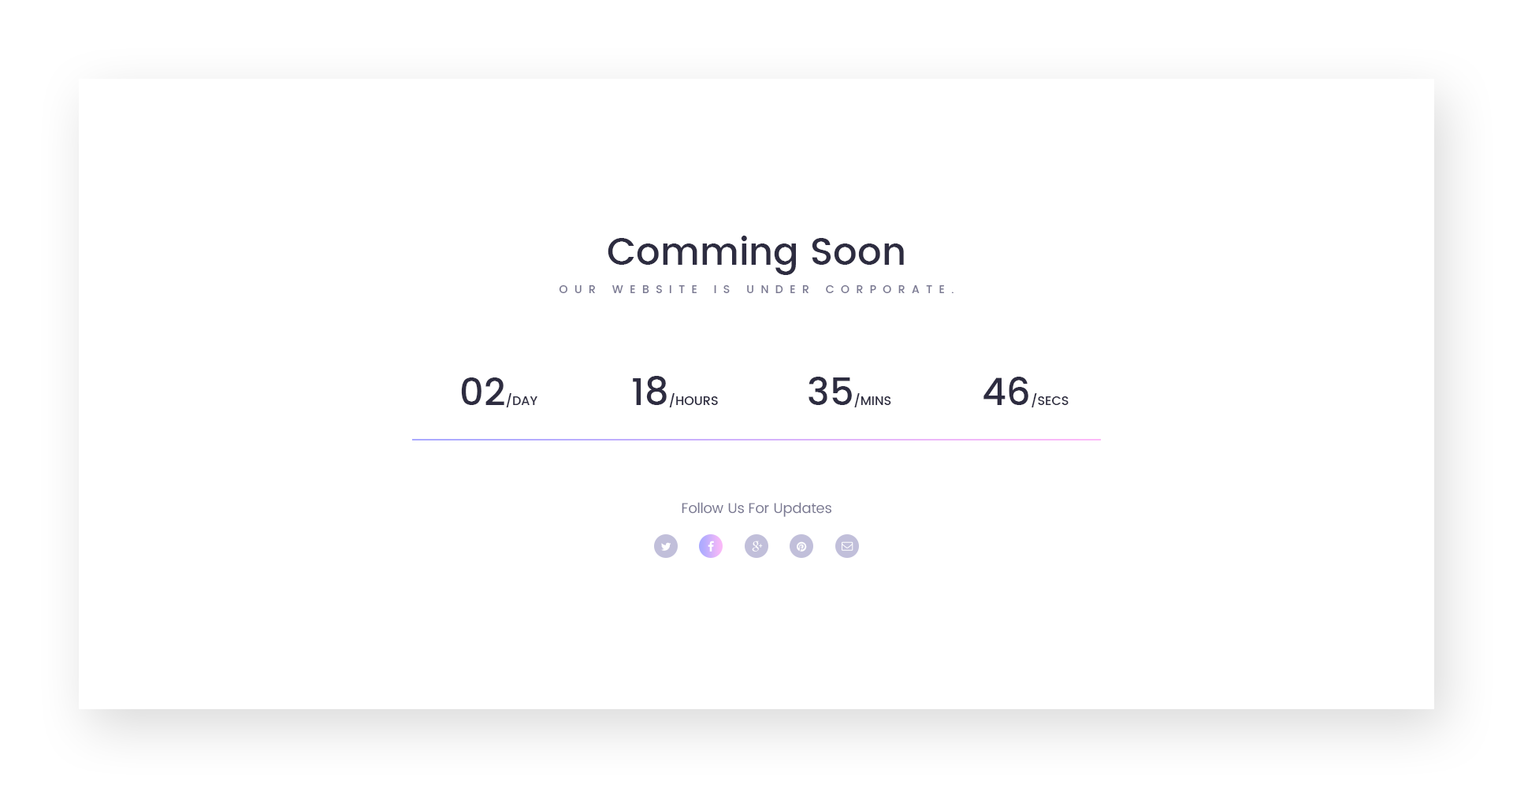
<style>
.page{position:relative;width:1513px;height:788px;background:#ffffff}
.page>*{position:absolute;margin:0}
.t1{font:11px/28.4px "Poppins-Medium";letter-spacing:0.6em;color:#7a7992;text-transform:uppercase}
.t2{font:37.8px/28.4px "Poppins-Medium";color:#2d2c40}
.t3{font:12.6px "Poppins-Medium";color:#2d2c40}
.t4{font:37.8px "Poppins-Medium";color:#2d2c40}
.t5{font:14.2px "Poppins-Regular";color:#7a7992}
</style>
<div class="page">
<p class="t1" style="left:559px;top:236px;width:395px;height:57px;text-align:center"><span class="t2">Comming Soon<br></span>Our Website is Under Corporate.</p>
<p class="t3" style="left:461px;top:377px;width:76px;height:30px"><span class="t4">02</span>/DAY</p>
<p class="t3" style="left:633px;top:376px;width:85px;height:31px"><span class="t4">18</span>/HOURS</p>
<p class="t3" style="left:809px;top:377px;width:82px;height:30px"><span class="t4">35</span>/MINS</p>
<p class="t3" style="left:984px;top:377px;width:85px;height:30px"><span class="t4">46</span>/SECS</p>
<p class="t5" style="left:682px;top:502px;width:149px;height:15px">Follow Us For Updates</p>
</div>
